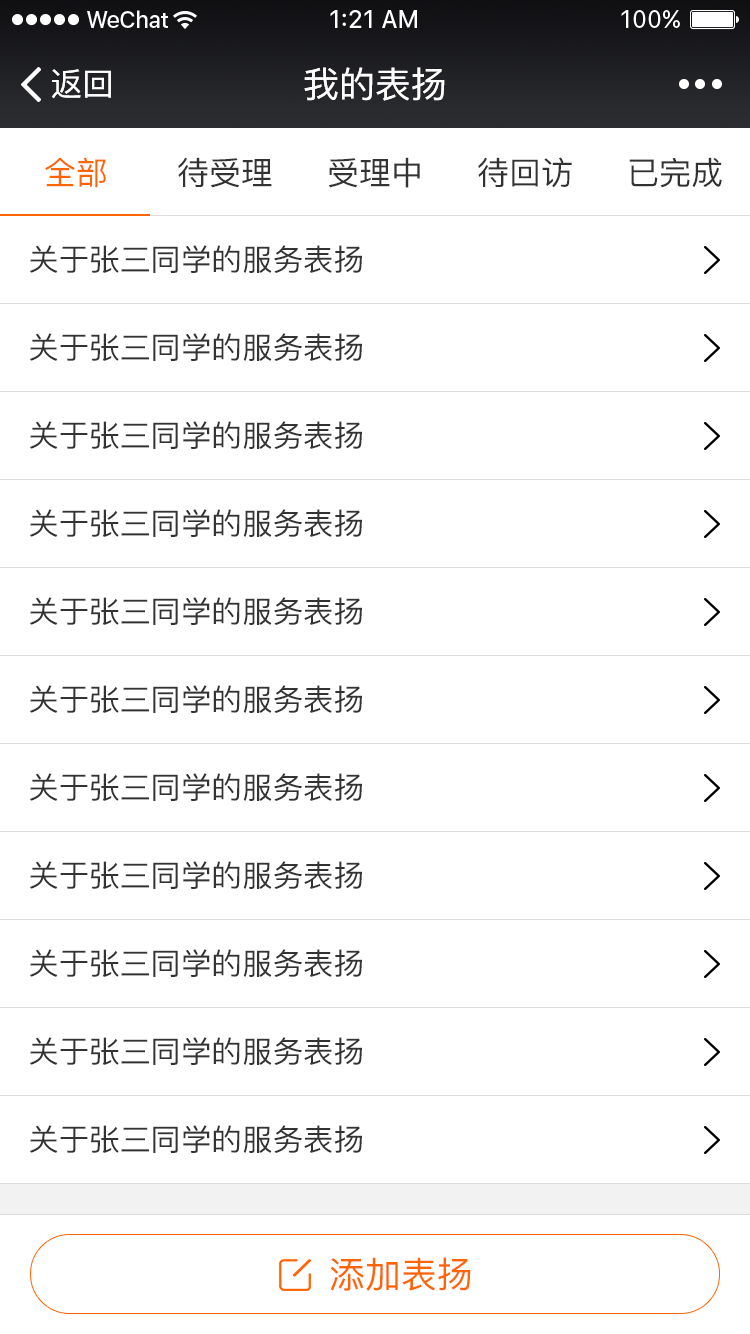
<style>
.page{position:relative;width:750px;height:1334px;background:#ffffff}
.page>*{position:absolute;margin:0}
.t1{font:32px "PingFang-SC-Medium";color:#ffffff}
.t2{font:36px "PingFang-SC-Medium";color:#ffffff}
.t3{font:32px "PingFang-SC-Medium";color:#ff6405}
.t4{font:32px "PingFang-SC-Medium";color:#323232}
.t5{font:32px "PingFang-SC-Medium";color:#333333}
.t6{font:30px "PingFang-SC-Medium";color:#333333}
.t7{font:36px "PingFang-SC-Medium";color:#ff6405}
</style>
<div class="page">
<p class="t1" style="left:52px;top:69px;width:59px;height:30px">返回</p>
<p class="t2" style="left:304px;top:67px;width:141px;height:34px">我的表扬</p>
<p class="t3" style="left:45px;top:157px;width:61px;height:31px">全部</p>
<p class="t4" style="left:178px;top:157px;width:94px;height:31px">待受理</p>
<p class="t5" style="left:328px;top:157px;width:92px;height:31px">受理中</p>
<p class="t4" style="left:478px;top:157px;width:94px;height:31px">待回访</p>
<p class="t4" style="left:629px;top:157px;width:93px;height:31px">已完成</p>
<p class="t6" style="left:30px;top:245px;width:332px;height:28px">关于张三同学的服务表扬</p>
<p class="t6" style="left:30px;top:333px;width:332px;height:28px">关于张三同学的服务表扬</p>
<p class="t6" style="left:30px;top:421px;width:332px;height:28px">关于张三同学的服务表扬</p>
<p class="t6" style="left:30px;top:509px;width:332px;height:28px">关于张三同学的服务表扬</p>
<p class="t6" style="left:30px;top:597px;width:332px;height:28px">关于张三同学的服务表扬</p>
<p class="t6" style="left:30px;top:685px;width:332px;height:28px">关于张三同学的服务表扬</p>
<p class="t6" style="left:30px;top:773px;width:332px;height:28px">关于张三同学的服务表扬</p>
<p class="t6" style="left:30px;top:861px;width:332px;height:28px">关于张三同学的服务表扬</p>
<p class="t6" style="left:30px;top:949px;width:332px;height:28px">关于张三同学的服务表扬</p>
<p class="t6" style="left:30px;top:1037px;width:332px;height:28px">关于张三同学的服务表扬</p>
<p class="t6" style="left:30px;top:1125px;width:332px;height:28px">关于张三同学的服务表扬</p>
<p class="t7" style="left:330px;top:1257px;width:141px;height:34px">添加表扬</p>
</div>
